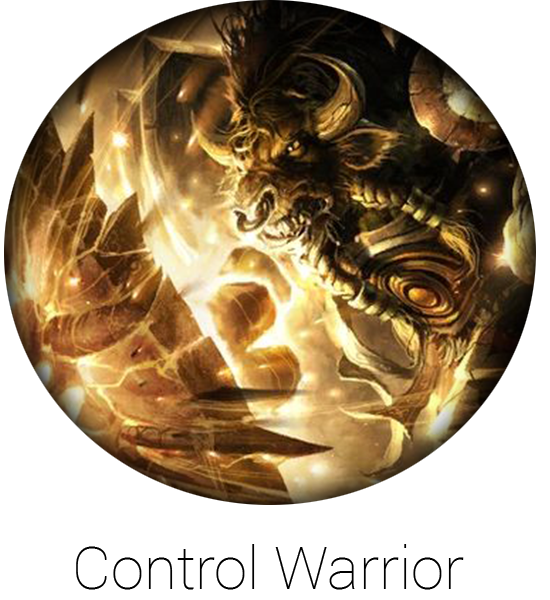
<style>
.page{position:relative;width:550px;height:600px;background:#ffffff}
.page>*{position:absolute;margin:0}
.t1{font:60px "Roboto-Thin";color:#000000}
</style>
<div class="page">
<p class="t1" style="left:76px;top:544px;width:388px;height:46px">Control Warrior</p>
</div>
